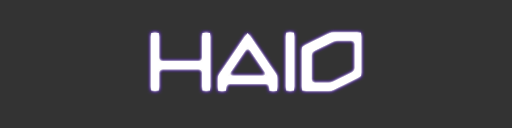
<style>
.page{position:relative;width:512px;height:128px;background:#333333}
.page>*{position:absolute;margin:0}
.t1{font:82px "KinineAlpha";color:#ffffff}
</style>
<div class="page">
<p class="t1" style="left:151px;top:32px;width:210px;height:59px">Haio</p>
</div>
